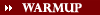
<style>
.page{position:relative;width:100px;height:15px;background:#7c0002}
.page>*{position:absolute;margin:0}
.t1{font:12px "PerpetuaTitlingMT-Bold";color:#ffffff}
</style>
<div class="page">
<p class="t1" style="left:22px;top:3px;width:60px;height:10px">warmup</p>
</div>
